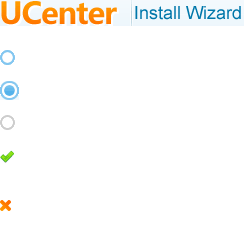
<style>
.page{position:relative;width:244px;height:250px;background:#ffffff}
.page>*{position:absolute;margin:0}
.t1{font:18px "ArialMT";color:#0077aa}
</style>
<div class="page">
<p class="t1" style="left:134px;top:4px;width:108px;height:21px">Install Wizard</p>
</div>
